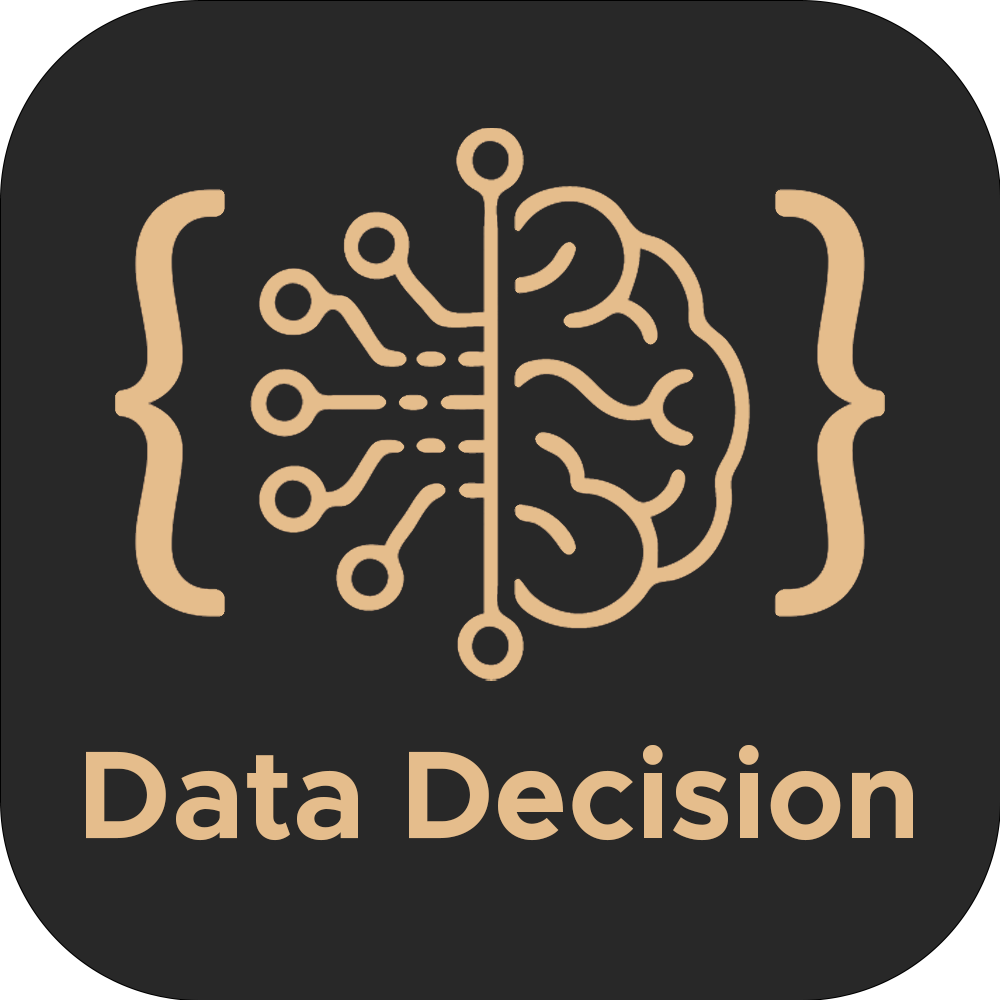
<style>
.page{position:relative;width:1000px;height:1000px;background:#282828}
.page>*{position:absolute;margin:0}
.t1{font:125px "Metropolis-Bold";color:#e5bd8c}
</style>
<div class="page">
<p class="t1" style="left:86px;top:745px;width:827px;height:96px">Data Decision</p>
</div>
